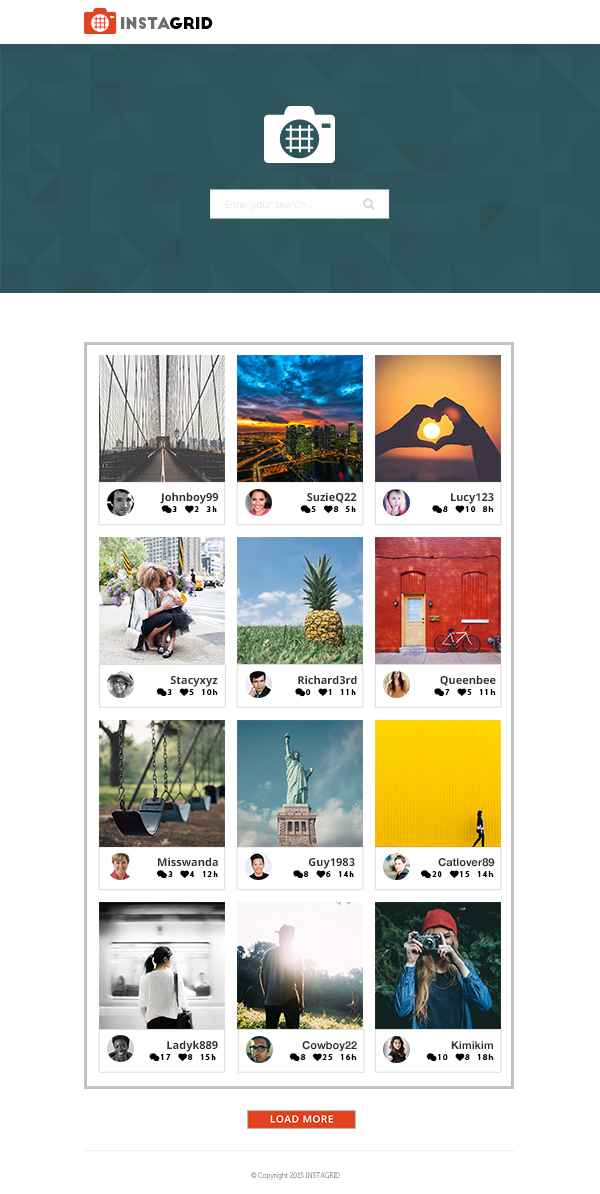
<style>
.page{position:relative;width:600px;height:1194px;background:#ffffff}
.page>*{position:absolute;margin:0}
.t1{font:11px "OpenSans-Bold";color:#2e2e2e}
.t2{font:11px "HelveticaNeue-Bold";color:#2e2e2e}
.t3{font:8px "Museo300-Regular";scale:0.82 1}
</style>
<div class="page">
<p class="t1" style="left:160px;top:492px;width:59px;height:12px">Johnboy99</p>
<p class="t1" style="left:307px;top:492px;width:50px;height:11px">SuzieQ22</p>
<p class="t1" style="left:451px;top:493px;width:43px;height:11px">Lucy123</p>
<p class="t1" style="left:170px;top:676px;width:48px;height:11px">Stacyxyz</p>
<p class="t1" style="left:298px;top:675px;width:59px;height:9px">Richard3rd</p>
<p class="t1" style="left:440px;top:675px;width:56px;height:11px">Queenbee</p>
<p class="t1" style="left:158px;top:857px;width:60px;height:9px">Misswanda</p>
<p class="t1" style="left:309px;top:858px;width:46px;height:11px">Guy1983</p>
<p class="t2" style="left:438px;top:858px;width:57px;height:9px">Catlover89</p>
<p class="t1" style="left:167px;top:1040px;width:51px;height:12px">Ladyk889</p>
<p class="t2" style="left:302px;top:1041px;width:55px;height:10px">Cowboy22</p>
<p class="t2" style="left:451px;top:1041px;width:42px;height:8px">Kimikim</p>
<p class="t3" style="left:251px;top:1172px;width:89px;height:8px">© Copyright 2015 INSTAGRID</p>
</div>
